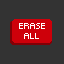
<style>
.page{position:relative;width:64px;height:64px;background:#333333}
.page>*{position:absolute;margin:0}
.t1{font:13px/10.8px "MunroSmall";color:#ffffff}
</style>
<div class="page">
<p class="t1" style="left:19px;top:23px;width:26px;height:16px;text-align:center">ERASE<br>ALL</p>
</div>
